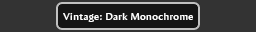
<style>
.page{position:relative;width:256px;height:32px;background:#333333}
.page>*{position:absolute;margin:0}
.t1{font:9.8px "AmiraParadiso";letter-spacing:0.05em;color:#ffffff}
</style>
<div class="page">
<p class="t1" style="left:63px;top:13px;width:130px;height:9px">Vintage: Dark Monochrome</p>
</div>
